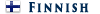
<style>
.page{position:relative;width:100px;height:14px;background:#ffffff}
.page>*{position:absolute;margin:0}
.t1{font:13px "TrajanPro3-Bold";letter-spacing:0.2em;color:#002a54;scale:0.8 1}
</style>
<div class="page">
<p class="t1" style="left:29px;top:2px;width:60px;height:11px">Finnish</p>
</div>
